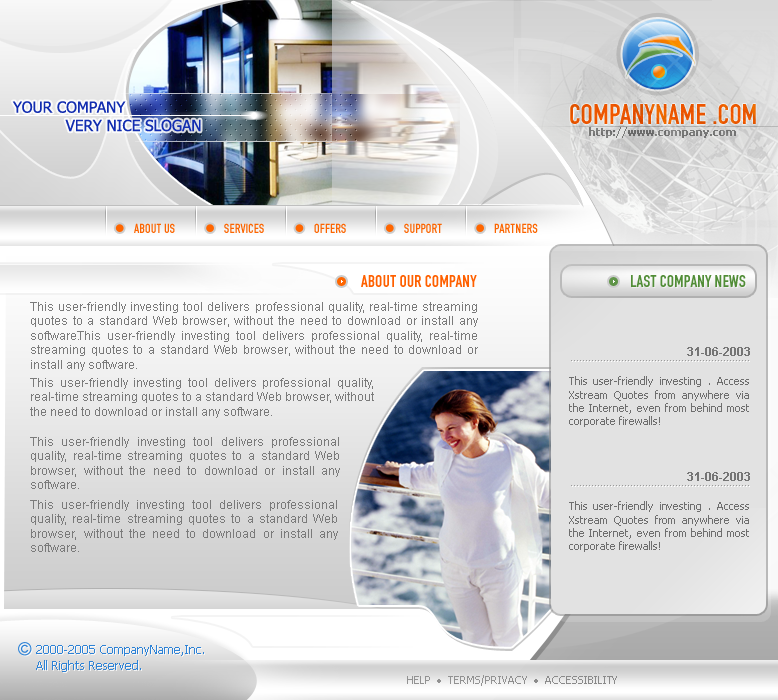
<style>
.page{position:relative;width:778px;height:700px}
.page>*{position:absolute;margin:0}
.t1{font:15.3px "Tahoma";color:#122db0;text-transform:uppercase}
.t2{font:30px "FetteEngschrift";color:#ff6600;text-transform:uppercase}
.t3{font:11px "Tahoma-Bold";color:#646464}
.t4{font:14px "FetteEngschrift";color:#fc6500;text-transform:uppercase}
.t5{font:18px "FetteEngschrift";color:#ff6000;text-transform:uppercase}
.t6{font:18px "FetteEngschrift";color:#518d37;text-transform:uppercase}
.t7{font:12px "ArialMT";color:#7a7a7a}
.t8{font:12px "Arial-BoldMT";color:#757575}
.t9{font:11px "Tahoma";color:#6e6e6e}
.t10{font:12px "Tahoma";color:#2d82d6}
.t11{font:11px "Tahoma";color:#929292;text-transform:uppercase}
</style>
<div class="page">
<p class="t1" style="left:12px;top:101px;width:189px;height:31px">your company <br>           very nice slogan</p>
<p class="t2" style="left:570px;top:104px;width:186px;height:20px">companyname .com</p>
<p class="t3" style="left:589px;top:127px;width:147px;height:11px;opacity:0.7">http://www.company.com</p>
<p class="t4" style="left:134px;top:223px;width:41px;height:10px">About Us</p>
<p class="t4" style="left:224px;top:223px;width:40px;height:10px">Services</p>
<p class="t4" style="left:314px;top:223px;width:32px;height:10px">Offers</p>
<p class="t4" style="left:404px;top:223px;width:38px;height:10px">Support</p>
<p class="t4" style="left:494px;top:223px;width:44px;height:10px">partners</p>
<p class="t5" style="left:361px;top:275px;width:116px;height:12px">about our company</p>
<p class="t6" style="left:631px;top:275px;width:115px;height:12px">last company news</p>
<p class="t7" style="left:30px;top:302px;width:448px;height:38px;text-align:justify">This user-friendly investing tool delivers professional quality, real-time streaming quotes to a standard Web browser, without the need to download or install any software.</p>
<p class="t7" style="left:31px;top:331px;width:447px;height:40px;text-align:justify">This user-friendly investing tool delivers professional quality, real-time streaming quotes to a standard Web browser, without the need to download or install any software.</p>
<p class="t8" style="left:687px;top:347px;width:63px;height:9px">31-06-2003</p>
<p class="t9" style="left:569px;top:376px;width:180px;height:51px;text-align:justify">This user-friendly investing . Access Xstream Quotes from anywhere via the Internet, even from behind most corporate firewalls!</p>
<p class="t7" style="left:30px;top:378px;width:344px;height:40px;text-align:justify">This user-friendly investing tool delivers professional quality, real-time streaming quotes to a standard Web browser, without the need to download or install any software.</p>
<p class="t7" style="left:30px;top:437px;width:310px;height:52px;text-align:justify">This user-friendly investing tool delivers professional quality, real-time streaming quotes to a standard Web browser, without the need to download or install any software.</p>
<p class="t8" style="left:687px;top:472px;width:63px;height:9px">31-06-2003</p>
<p class="t7" style="left:30px;top:500px;width:308px;height:52px;text-align:justify">This user-friendly investing tool delivers professional quality, real-time streaming quotes to a standard Web browser, without the need to download or install any software.</p>
<p class="t9" style="left:569px;top:501px;width:180px;height:51px;text-align:justify">This user-friendly investing . Access Xstream Quotes from anywhere via the Internet, even from behind most corporate firewalls!</p>
<p class="t10" style="left:36px;top:645px;width:168px;height:11px">2000-2005 CompanyName,Inc.</p>
<p class="t10" style="left:36px;top:660px;width:105px;height:12px">All Rights Reserved.</p>
<p class="t11" style="left:407px;top:675px;width:210px;height:11px">Help  •  Terms/Privacy  •  accessibility</p>
</div>
